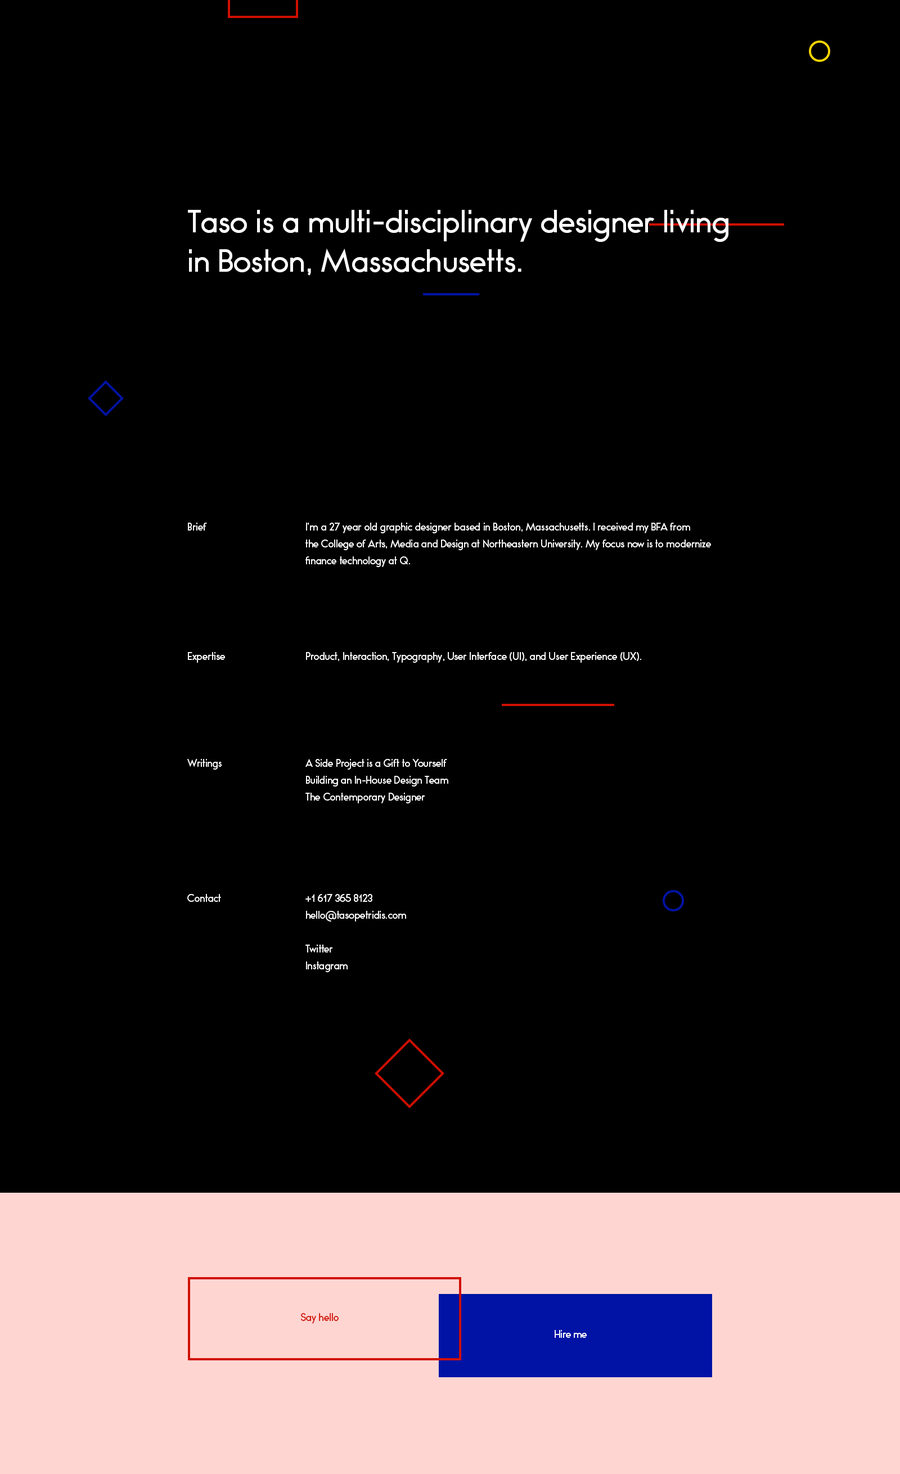
<style>
.page{position:relative;width:900px;height:1474px;background:#000000}
.page>*{position:absolute;margin:0}
.t1{font:28.1px/39.4px "Bambino-Regular";color:#ffffff}
.t2{font:9px "Bambino-Regular";color:#ffffff}
.t3{font:9px/16.9px "Bambino-Regular";color:#ffffff}
.t4{font:9px "Bambino-Regular";color:#d00f00}
</style>
<div class="page">
<p class="t1" style="left:188px;top:210px;width:540px;height:66px">Taso is a multi-disciplinary designer living <br>in Boston, Massachusetts.</p>
<p class="t2" style="left:188px;top:523px;width:19px;height:7px">Brief</p>
<p class="t3" style="left:305px;top:523px;width:406px;height:44px">I’m a 27 year old graphic designer based in Boston, Massachusetts. I received my BFA from <br>the College of Arts, Media and Design at Northeastern University. My focus now is to modernize <br>finance technology at Q.</p>
<p class="t2" style="left:188px;top:652px;width:37px;height:11px">Expertise</p>
<p class="t2" style="left:306px;top:652px;width:335px;height:11px">Product, Interaction, Typography, User Interface (UI), and User Experience (UX).</p>
<p class="t2" style="left:187px;top:759px;width:35px;height:11px">Writings</p>
<p class="t3" style="left:305px;top:759px;width:143px;height:44px">A Side Project is a Gift to Yourself<br>Building an In-House Design Team<br>The Contemporary Designer</p>
<p class="t2" style="left:187px;top:894px;width:34px;height:8px">Contact</p>
<p class="t3" style="left:305px;top:894px;width:101px;height:78px">+1 617 365 8123<br>hello@tasopetridis.com<br><br>Twitter<br>Instagram</p>
<p class="t4" style="left:301px;top:1313px;width:38px;height:11px">Say hello</p>
<p class="t2" style="left:555px;top:1330px;width:32px;height:8px">Hire me</p>
</div>
